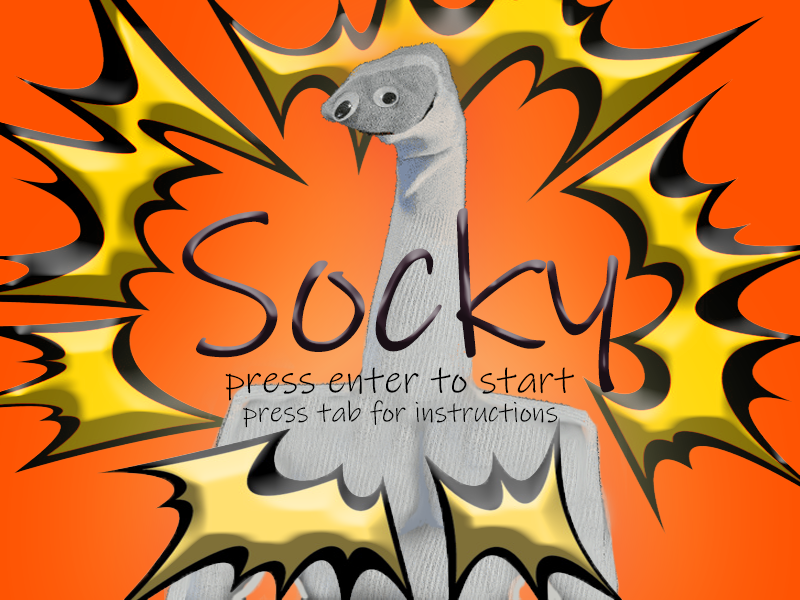
<style>
.page{position:relative;width:800px;height:600px}
.page>*{position:absolute;margin:0}
.t1{font:200px "InkFree"}
.t2{font:40px "InkFree";color:#000000}
.t3{font:29px "InkFree";color:#000000}
</style>
<div class="page">
<p class="t1" style="left:182px;top:208px;width:437px;height:185px">Socky</p>
<p class="t2" style="left:225px;top:367px;width:349px;height:34px">press enter to start</p>
<p class="t3" style="left:243px;top:400px;width:315px;height:28px">press tab for instructions</p>
</div>
